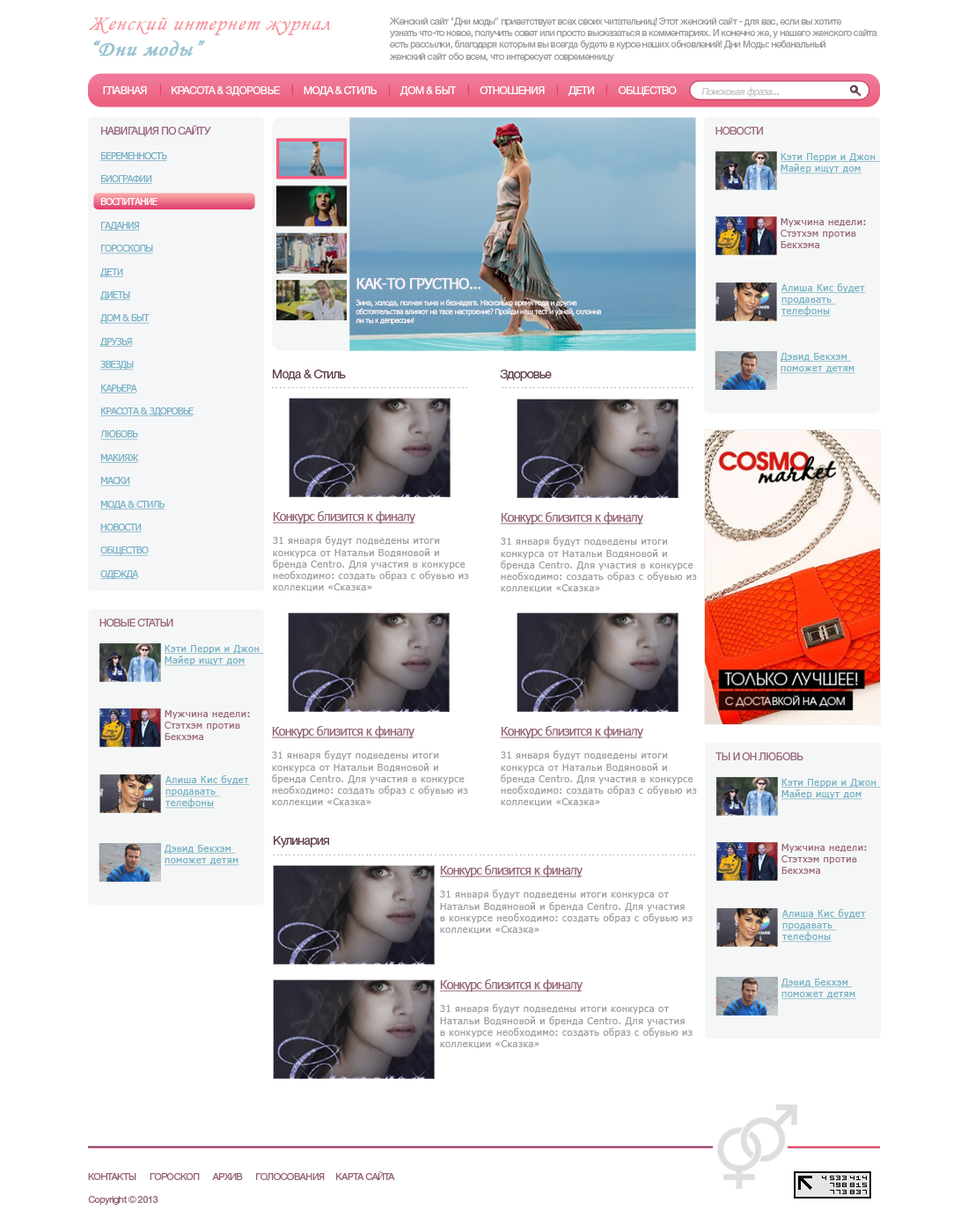
<style>
.page{position:relative;width:968px;height:1232px;background:#ffffff}
.page>*{position:absolute;margin:0}
.t1{font:21.1px "MonotypeCorsiva";letter-spacing:0.05em;color:#f5929a;font-style:italic}
.t2{font:21.1px "MonotypeCorsiva";letter-spacing:0.05em;color:#99c3d2;font-weight:bold;font-style:italic}
.t3{font:9.7px "HelveticaNeueCyr-Roman";letter-spacing:-0.05em;color:#9b9fa0}
.t4{font:10.6px "HelveticaNeueCyr-Roman";letter-spacing:-0.05em;color:#ffffff}
.t5{font:9.7px "Tahoma";letter-spacing:-0.05em;color:#c5c5c5;font-style:italic}
.t6{font:10.6px "HelveticaNeueCyr-Roman";letter-spacing:-0.05em;color:#9b6a80}
.t7{font:9.7px "Tahoma";letter-spacing:-0.05em;color:#77b0c4;text-decoration:underline}
.t8{font:9.7px "Tahoma";letter-spacing:-0.05em;color:#ffffff}
.t9{font:9.7px "Tahoma";letter-spacing:0.05em;color:#77b0c4;text-decoration:underline}
.t10{font:9.7px "Tahoma";letter-spacing:0.05em;color:#9b6a80}
.t11{font:7.4px "Tahoma";letter-spacing:-0.05em;color:#fdf1f4}
.t12{font:14.7px "Tahoma";letter-spacing:-0.05em;color:#fdf1f4;font-weight:bold}
.t13{font:12.3px "HelveticaNeueCyr-Roman";letter-spacing:-0.05em;color:#603e4e}
.t14{font:5.3px "Tahoma";letter-spacing:0.05em;color:#bab8b9}
.t15{font:9.7px "Tahoma";letter-spacing:0.05em;color:#9b9fa0}
.t16{font:12.3px "Tahoma";letter-spacing:-0.05em;color:#946579;text-decoration:underline}
.t17{font:9.7px "HelveticaNeueCyr-Roman";letter-spacing:-0.05em;color:#946579}
</style>
<div class="page">
<p class="t1" style="left:88px;top:18px;width:244px;height:38px">Женский интернет журнал<br><span class="t2">“Дни моды”</span></p>
<p class="t3" style="left:389px;top:18px;width:488px;height:44px">Женский сайт "Дни моды" приветствует всех своих читательниц! Этот женский сайт - для вас, если вы хотите <br>узнать что-то новое, получить совет или просто высказаться в комментариях. И конечно же, у нашего женского сайта <br>есть рассылки, благодаря которым вы всегда будете в курсе наших обновлений! Дни Моды: небанальный <br>женский сайт обо всем, что интересует современницу</p>
<p class="t4" style="left:103px;top:86px;width:574px;height:10px">ГЛАВНАЯ          КРАСОТА &amp; ЗДОРОВЬЕ          МОДА &amp; СТИЛЬ          ДОМ &amp; БЫТ          ОТНОШЕНИЯ          ДЕТИ          ОБЩЕСТВО</p>
<p class="t5" style="left:701px;top:87px;width:78px;height:10px">Поисковая фраза...</p>
<p class="t6" style="left:101px;top:125px;width:110px;height:11px">НАВИГАЦИЯ ПО САЙТУ</p>
<p class="t6" style="left:715px;top:127px;width:48px;height:8px">НОВОСТИ</p>
<p class="t7" style="left:100px;top:152px;width:94px;height:427px">БЕРЕМЕННОСТЬ<br><br>БИОГРАФИИ<br><br><span class="t8">ВОСПИТАНИЕ<br></span><br>ГАДАНИЯ<br><br>ГОРОСКОПЫ<br><br>ДЕТИ<br><br>ДИЕТЫ<br><br>ДОМ &amp; БЫТ<br><br>ДРУЗЬЯ<br><br>ЗВЕЗДЫ<br><br>КАРЬЕРА<br><br>КРАСОТА &amp; ЗДОРОВЬЕ<br><br>ЛЮБОВЬ<br><br>МАКИЯЖ<br><br>МАСКИ<br><br>МОДА &amp; СТИЛЬ<br><br>НОВОСТИ<br><br>ОБЩЕСТВО<br><br>ОДЕЖДА</p>
<p class="t9" style="left:781px;top:153px;width:99px;height:21px">Кэти Перри и Джон <br>Майер ищут дом</p>
<p class="t10" style="left:781px;top:218px;width:85px;height:30px">Мужчина недели: <br>Стэтхэм против <br>Бекхэма</p>
<p class="t11" style="left:355px;top:278px;width:246px;height:47px"><span class="t12">КАК-ТО ГРУСТНО...<br><br></span>Зима, холода, полная тьма и безнадега. Насколько время года и другие <br>обстоятельства влияют на твое настроение? Пройди наш тест и узнай, склонна <br>ли ты к депрессии!</p>
<p class="t9" style="left:781px;top:283px;width:84px;height:34px">Алиша Кис будет<br>продавать <br>телефоны</p>
<p class="t9" style="left:781px;top:353px;width:74px;height:21px">Дэвид Бекхэм <br>поможет детям</p>
<p class="t13" style="left:273px;top:370px;width:73px;height:10px">Мода &amp; Стиль</p>
<p class="t13" style="left:500px;top:370px;width:52px;height:11px">Здоровье</p>
<p class="t14" style="left:272px;top:387px;width:195px;height:1px">- - - - - - - - - - - - - - - - - - - - - - - - - - - - - - - - - - - - - - - - - - - - - - - - -</p>
<p class="t14" style="left:502px;top:387px;width:191px;height:1px">- - - - - - - - - - - - - - - - - - - - - - - - - - - - - - - - - - - - - - - - - - - - - - - -</p>
<p class="t15" style="left:273px;top:511px;width:196px;height:80px"><span class="t16">Конкурс близится к финалу<br><br></span>31 января будут подведены итоги <br>конкурса от Натальи Водяновой и <br>бренда Centro. Для участия в конкурсе <br>необходимо: создать образ с обувью из <br>коллекции «Сказка»</p>
<p class="t15" style="left:501px;top:512px;width:196px;height:80px"><span class="t16">Конкурс близится к финалу<br><br></span>31 января будут подведены итоги <br>конкурса от Натальи Водяновой и <br>бренда Centro. Для участия в конкурсе <br>необходимо: создать образ с обувью из <br>коллекции «Сказка»</p>
<p class="t6" style="left:99px;top:619px;width:74px;height:8px">НОВЫЕ СТАТЬИ</p>
<p class="t9" style="left:165px;top:645px;width:99px;height:21px">Кэти Перри и Джон <br>Майер ищут дом</p>
<p class="t10" style="left:165px;top:710px;width:85px;height:30px">Мужчина недели: <br>Стэтхэм против <br>Бекхэма</p>
<p class="t15" style="left:272px;top:726px;width:196px;height:80px"><span class="t16">Конкурс близится к финалу<br><br></span>31 января будут подведены итоги <br>конкурса от Натальи Водяновой и <br>бренда Centro. Для участия в конкурсе <br>необходимо: создать образ с обувью из <br>коллекции «Сказка»</p>
<p class="t15" style="left:501px;top:726px;width:196px;height:80px"><span class="t16">Конкурс близится к финалу<br><br></span>31 января будут подведены итоги <br>конкурса от Натальи Водяновой и <br>бренда Centro. Для участия в конкурсе <br>необходимо: создать образ с обувью из <br>коллекции «Сказка»</p>
<p class="t6" style="left:715px;top:751px;width:88px;height:10px">ТЫ И ОН ЛЮБОВЬ</p>
<p class="t9" style="left:165px;top:775px;width:84px;height:34px">Алиша Кис будет<br>продавать <br>телефоны</p>
<p class="t9" style="left:781px;top:779px;width:100px;height:21px">Кэти Перри и Джон <br>Майер ищут дом</p>
<p class="t9" style="left:165px;top:845px;width:74px;height:21px">Дэвид Бекхэм <br>поможет детям</p>
<p class="t13" style="left:274px;top:836px;width:55px;height:11px">Кулинария</p>
<p class="t10" style="left:781px;top:844px;width:86px;height:30px">Мужчина недели: <br>Стэтхэм против <br>Бекхэма</p>
<p class="t14" style="left:273px;top:854px;width:422px;height:1px">- - - - - - - - - - - - - - - - - - - - - - - - - - - - - - - - - - - - - - - - - - - - - - - - - - - - - - - - - - - - - - - - - - - - - - - - - - - - - - - - - - - - - - - - - - - - - - - - - - - - - - - - -</p>
<p class="t15" style="left:440px;top:865px;width:253px;height:69px"><span class="t16">Конкурс близится к финалу<br><br></span>31 января будут подведены итоги конкурса от <br>Натальи Водяновой и бренда Centro. Для участия <br>в конкурсе необходимо: создать образ с обувью из <br>коллекции «Сказка»</p>
<p class="t9" style="left:781px;top:909px;width:85px;height:33px">Алиша Кис будет<br>продавать <br>телефоны</p>
<p class="t15" style="left:440px;top:979px;width:253px;height:69px"><span class="t16">Конкурс близится к финалу<br><br></span>31 января будут подведены итоги конкурса от <br>Натальи Водяновой и бренда Centro. Для участия <br>в конкурсе необходимо: создать образ с обувью из <br>коллекции «Сказка»</p>
<p class="t9" style="left:781px;top:979px;width:75px;height:21px">Дэвид Бекхэм <br>поможет детям</p>
<p class="t17" style="left:88px;top:1171px;width:307px;height:34px">КОНТАКТЫ      ГОРОСКОП      АРХИВ      ГОЛОСОВАНИЯ     КАРТА САЙТА<br><br>Copyright © 2013</p>
</div>
